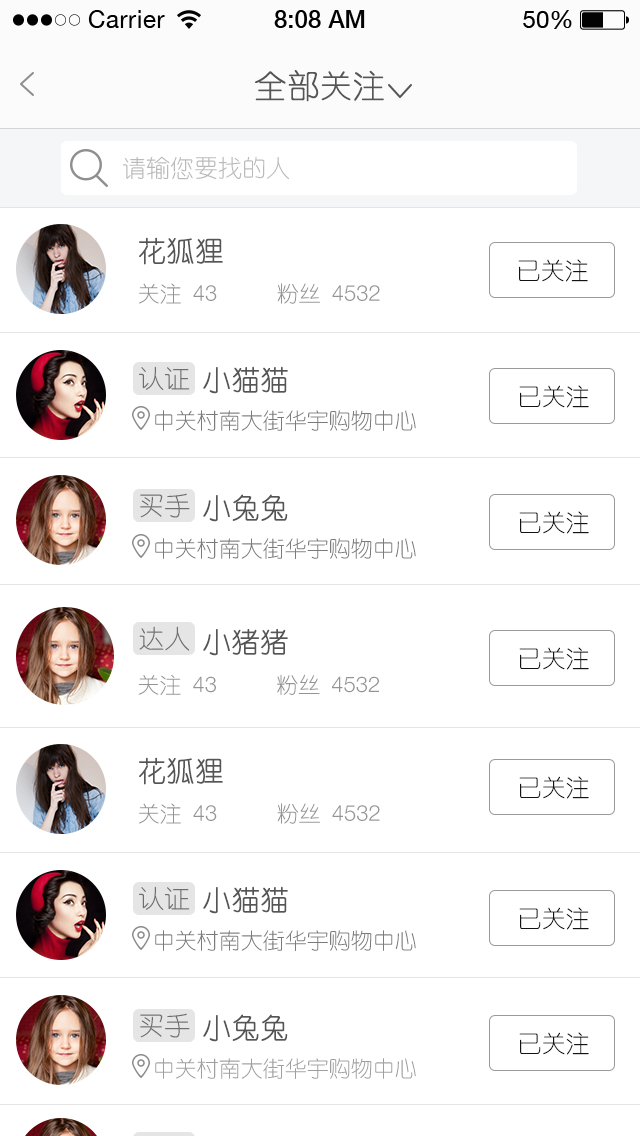
<style>
.page{position:relative;width:640px;height:1136px;background:#ffffff}
.page>*{position:absolute;margin:0}
.t1{font:32px "YouYuan";color:#555555;text-transform:uppercase;font-weight:bold}
.t2{font:24px "YouYuan";color:#bababa;text-transform:uppercase}
.t3{font:28px "YouYuan";color:#555555;text-transform:uppercase;font-weight:bold}
.t4{font:24px "YouYuan";color:#121414}
.t5{font:22px "YouYuan";color:#949494;text-transform:uppercase}
.t6{font:22px "HelveticaNeueLTPro-Lt";color:#949494;text-transform:uppercase}
.t7{font:26px "YouYuan";color:#6e6e6e;text-transform:uppercase}
.t8{font:22px "YouYuan";color:#7b7b7b;text-transform:uppercase}
.t9{font:21.9px "YouYuan";color:#949494;text-transform:uppercase}
.t10{font:21.9px "HelveticaNeueLTPro-Lt";color:#949494;text-transform:uppercase}
.t11{font:22px "YouYuan";color:#9f9f9f;text-transform:uppercase}
</style>
<div class="page">
<p class="t1" style="left:255px;top:70px;width:129px;height:32px">全部关注</p>
<p class="t2" style="left:122px;top:156px;width:167px;height:24px">请输您要找的人</p>
<p class="t3" style="left:139px;top:237px;width:84px;height:28px">花狐狸</p>
<p class="t4" style="left:518px;top:259px;width:70px;height:23px">已关注</p>
<p class="t5" style="left:139px;top:283px;width:78px;height:21px">关注 <span class="t6">43</span></p>
<p class="t6" style="left:277px;top:283px;width:103px;height:21px"><span class="t5">粉丝 </span>4532</p>
<p class="t7" style="left:139px;top:366px;width:51px;height:24px">认证</p>
<p class="t3" style="left:203px;top:366px;width:85px;height:28px">小猫猫</p>
<p class="t4" style="left:519px;top:385px;width:70px;height:23px">已关注</p>
<p class="t8" style="left:155px;top:410px;width:261px;height:21px">中关村南大街华宇购物中心</p>
<p class="t7" style="left:140px;top:493px;width:50px;height:25px">买手</p>
<p class="t3" style="left:203px;top:494px;width:85px;height:28px">小兔兔</p>
<p class="t4" style="left:519px;top:511px;width:70px;height:23px">已关注</p>
<p class="t8" style="left:155px;top:538px;width:261px;height:21px">中关村南大街华宇购物中心</p>
<p class="t7" style="left:139px;top:626px;width:51px;height:25px">达人</p>
<p class="t3" style="left:203px;top:629px;width:85px;height:27px">小猪猪</p>
<p class="t4" style="left:519px;top:647px;width:70px;height:23px">已关注</p>
<p class="t9" style="left:138px;top:675px;width:78px;height:20px">关注 <span class="t10">43</span></p>
<p class="t10" style="left:277px;top:674px;width:102px;height:21px"><span class="t9">粉丝 </span>4532</p>
<p class="t3" style="left:139px;top:757px;width:84px;height:28px">花狐狸</p>
<p class="t4" style="left:519px;top:776px;width:70px;height:23px">已关注</p>
<p class="t5" style="left:139px;top:803px;width:78px;height:21px">关注 <span class="t6">43</span></p>
<p class="t6" style="left:277px;top:803px;width:103px;height:21px"><span class="t5">粉丝 </span>4532</p>
<p class="t7" style="left:139px;top:886px;width:51px;height:24px">认证</p>
<p class="t3" style="left:203px;top:886px;width:85px;height:28px">小猫猫</p>
<p class="t4" style="left:519px;top:907px;width:70px;height:23px">已关注</p>
<p class="t8" style="left:155px;top:930px;width:261px;height:21px">中关村南大街华宇购物中心</p>
<p class="t7" style="left:140px;top:1013px;width:50px;height:25px">买手</p>
<p class="t3" style="left:203px;top:1014px;width:85px;height:28px">小兔兔</p>
<p class="t4" style="left:519px;top:1032px;width:70px;height:23px">已关注</p>
<p class="t11" style="left:155px;top:1058px;width:261px;height:21px">中关村南大街华宇购物中心</p>
</div>
